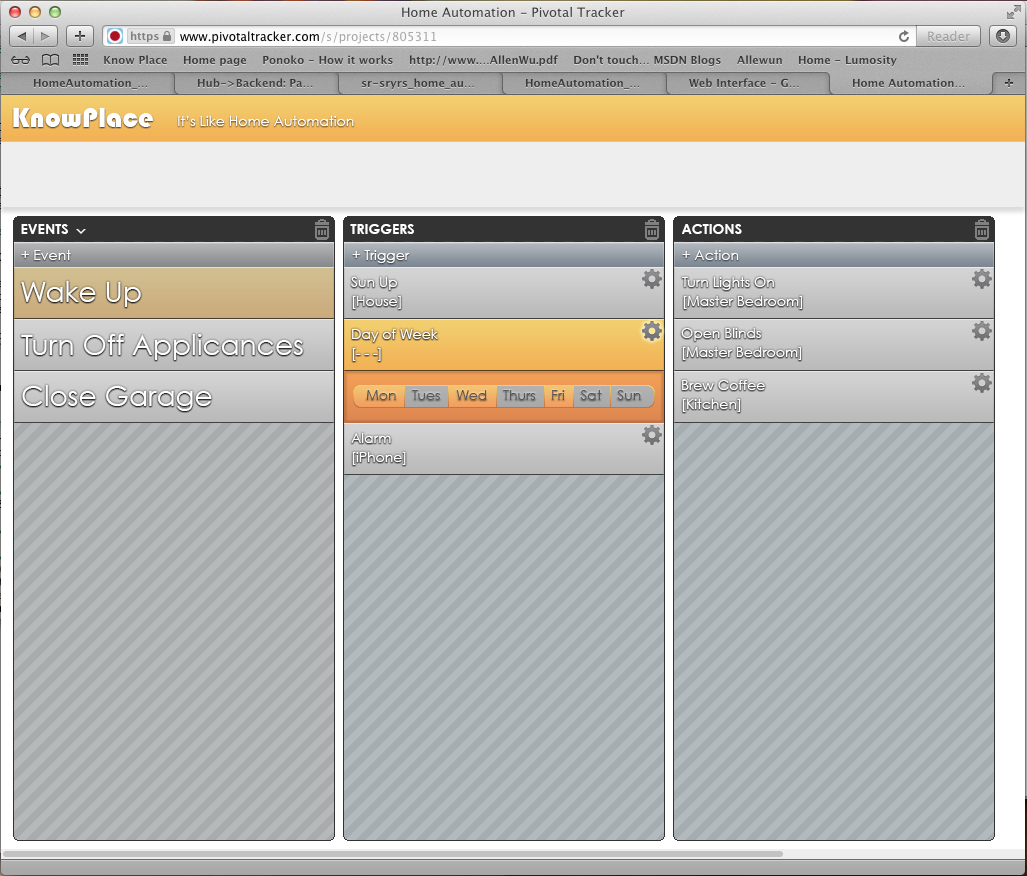
<style>
.page{position:relative;width:1027px;height:876px}
.page>*{position:absolute;margin:0}
.t1{font:28px "Bauhaus93";color:#ffffff}
.t2{font:14px "CenturyGothic";color:#ffffff}
.t3{font:14px "CenturyGothic-Bold";color:#ffffff}
.t4{font:28px "CenturyGothic";color:#ffffff}
.t5{font:14px/19px "CenturyGothic";color:#ffffff}
.t6{font:14px "CenturyGothic";color:#585858}
</style>
<div class="page">
<p class="t1" style="left:13px;top:108px;width:140px;height:19px">KnowPlace</p>
<p class="t2" style="left:178px;top:116px;width:176px;height:10px">It’s Like Home Automation</p>
<p class="t3" style="left:21px;top:224px;width:47px;height:10px">EVENTS</p>
<p class="t3" style="left:350px;top:224px;width:64px;height:10px">TRIGGERS</p>
<p class="t3" style="left:682px;top:224px;width:60px;height:10px">ACTIONS</p>
<p class="t2" style="left:21px;top:250px;width:50px;height:10px">+ Event</p>
<p class="t2" style="left:352px;top:250px;width:58px;height:13px">+ Trigger</p>
<p class="t2" style="left:682px;top:250px;width:57px;height:10px">+ Action</p>
<p class="t4" style="left:21px;top:281px;width:120px;height:26px">Wake Up</p>
<p class="t5" style="left:351px;top:277px;width:50px;height:32px">Sun Up<br>[House]</p>
<p class="t5" style="left:682px;top:277px;width:120px;height:32px">Turn Lights On<br>[Master Bedroom]</p>
<p class="t5" style="left:352px;top:329px;width:86px;height:32px">Day of Week<br>[- - -]</p>
<p class="t5" style="left:681px;top:328px;width:120px;height:32px">Open Blinds<br>[Master Bedroom]</p>
<p class="t4" style="left:21px;top:334px;width:282px;height:26px">Turn Off Applicances</p>
<p class="t4" style="left:22px;top:385px;width:190px;height:26px">Close Garage</p>
<p class="t6" style="left:366px;top:390px;width:275px;height:10px">Mon    Tues    Wed    Thurs    Fri    Sat    Sun</p>
<p class="t5" style="left:682px;top:380px;width:83px;height:32px">Brew Coffee<br>[Kitchen]</p>
<p class="t5" style="left:351px;top:433px;width:55px;height:32px">Alarm<br>[iPhone]</p>
</div>
